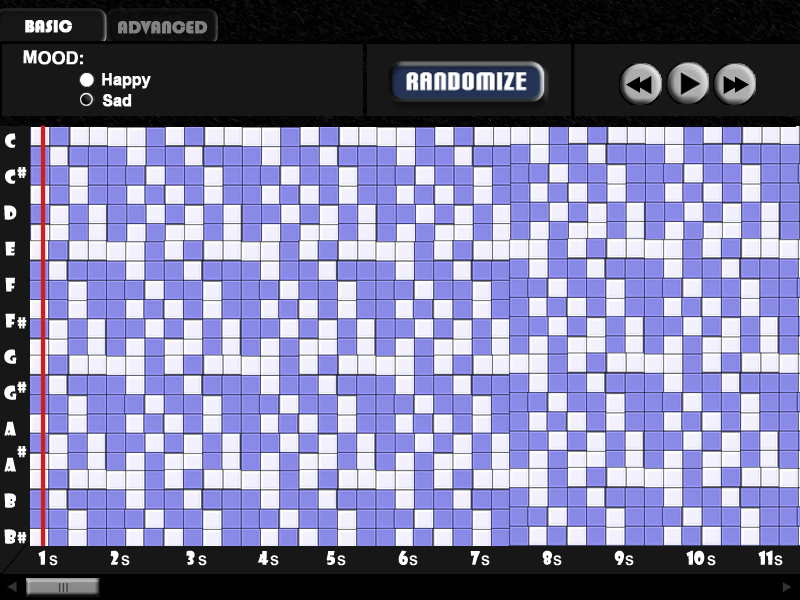
<style>
.page{position:relative;width:800px;height:600px}
.page>*{position:absolute;margin:0}
.t1{font:18px "Arial-BoldMT";letter-spacing:-0.025em;color:#ffffff;font-weight:bold}
.t2{font:16.1px "Arial-BoldMT";letter-spacing:-0.025em;color:#ffffff;font-weight:bold}
.t3{font:18px/21.5px "ShowcardGothic-Reg";color:#ffffff}
.t4{font:24px/21.5px "ShowcardGothic-Reg";color:#ffffff}
.t5{font:18px "ShowcardGothic-Reg";color:#ffffff}
.t6{font:18px "ArialMT";color:#ffffff}
</style>
<div class="page">
<p class="t1" style="left:23px;top:50px;width:60px;height:15px;rotate:1deg">MOOD:</p>
<p class="t2" style="left:102px;top:73px;width:49px;height:16px">Happy</p>
<p class="t2" style="left:102px;top:94px;width:30px;height:13px">Sad</p>
<p class="t3" style="left:4px;top:133px;width:13px;height:411px;text-align:center"><span class="t4"><br></span>c  c d   e f f g g a a b b</p>
<p class="t3" style="left:17px;top:167px;width:10px;height:377px;text-align:center">#<br><br><br><br><br><br><br>#<br><br><br>#<br><br><br>#<br><br><br><br>#</p>
<p class="t5" style="left:38px;top:550px;width:735px;height:15px">1   2   3   4   5   6  7  8  9  10  11</p>
<p class="t6" style="left:49px;top:555px;width:734px;height:11px">s  s   s   s  s  s  s  s  s    s   s</p>
</div>
